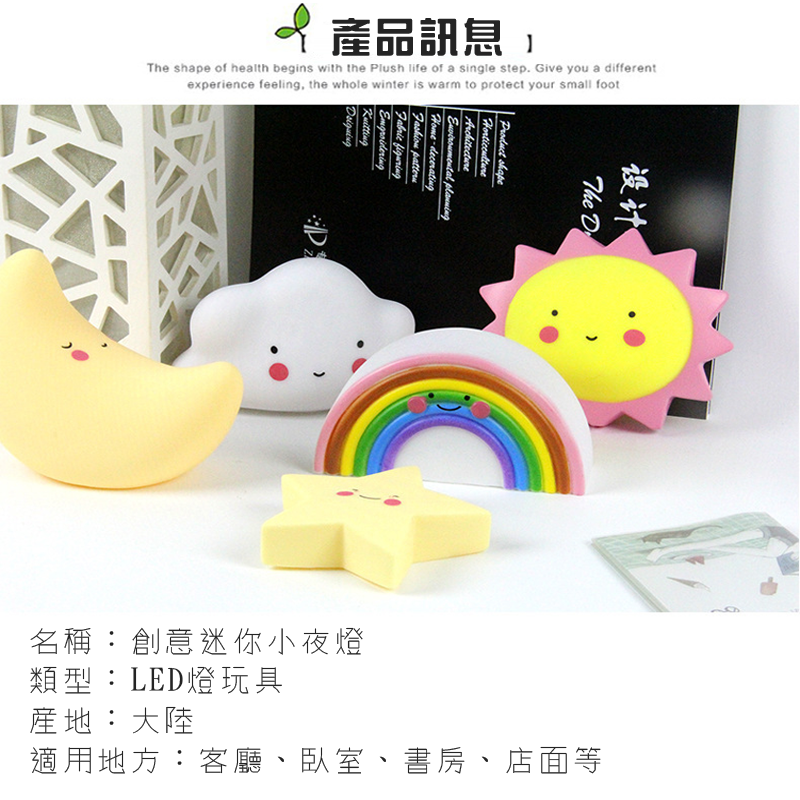
<style>
.page{position:relative;width:800px;height:800px;background:#ffffff}
.page>*{position:absolute;margin:0}
.t1{font:40px "HanWangZonYi";letter-spacing:0.1em;color:#242424}
.t2{font:30.9px "winman-tun33014";letter-spacing:0.1em;color:#242424}
</style>
<div class="page">
<p class="t1" style="left:332px;top:18px;width:170px;height:38px">產品訊息</p>
<p class="t2" style="left:30px;top:627px;width:571px;height:147px">名稱：創意迷你小夜燈<br>類型：LED燈玩具<br>產地：大陸<br>適用地方：客廳、臥室、書房、店面等</p>
</div>
